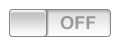
<style>
.page{position:relative;width:120px;height:46px;background:#ffffff}
.page>*{position:absolute;margin:0}
.t1{font:18px "ArialRoundedMTBold";color:#9a9a9a}
</style>
<div class="page">
<p class="t1" style="left:60px;top:16px;width:36px;height:14px">OFF</p>
</div>
